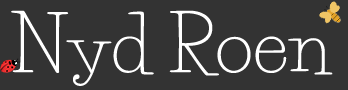
<style>
.page{position:relative;width:348px;height:90px;background:#333333}
.page>*{position:absolute;margin:0}
.t1{font:75px "LifeSavers-Regular";color:#ffffff}
</style>
<div class="page">
<p class="t1" style="left:11px;top:10px;width:322px;height:76px">Nyd Roen</p>
</div>
